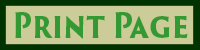
<style>
.page{position:relative;width:200px;height:50px;background:#cccc99}
.page>*{position:absolute;margin:0}
.t1{font:33.4px "TrajanSansPro-Black";color:#339933;scale:0.85 1}
</style>
<div class="page">
<p class="t1" style="left:15px;top:12px;width:173px;height:27px">Print Page</p>
</div>
